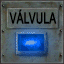
<style>
.page{position:relative;width:64px;height:64px}
.page>*{position:absolute;margin:0}
.t1{font:15.3px "ArialMT";color:#000000;font-weight:bold;scale:0.66 1}
</style>
<div class="page">
<p class="t1" style="left:9px;top:9px;width:48px;height:15px">VÁLVULA</p>
</div>
